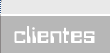
<style>
.page{position:relative;width:110px;height:53px;background:#b7b7b7}
.page>*{position:absolute;margin:0}
.t1{font:24px "OrbitBbyBT-Regular";color:#ffffff}
</style>
<div class="page">
<p class="t1" style="left:14px;top:26px;width:81px;height:17px">clientes</p>
</div>
